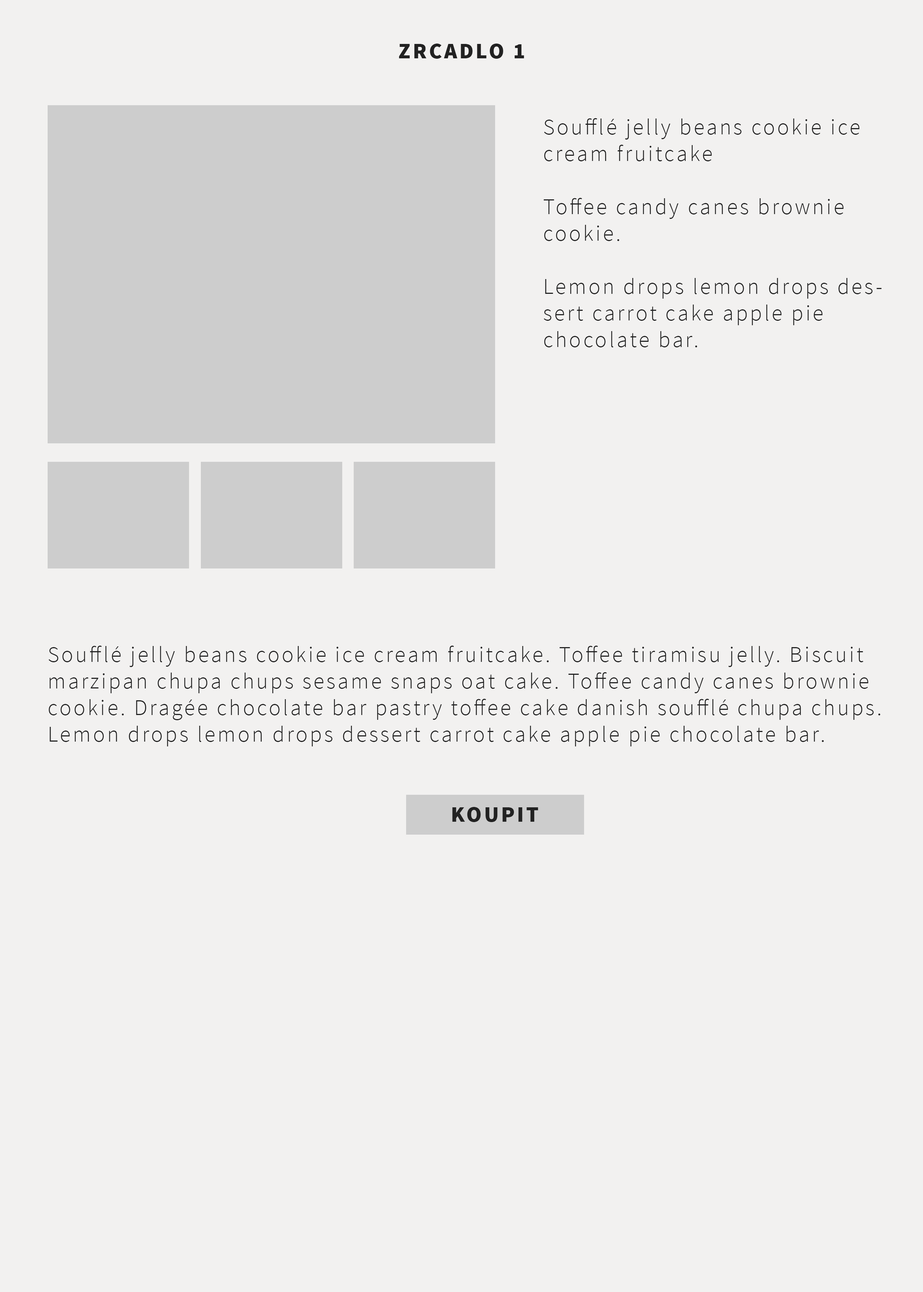
<style>
.page{position:relative;width:923px;height:1292px;background:#f2f1f0}
.page>*{position:absolute;margin:0}
.t1{font:22.1px "SourceSansPro-Black";letter-spacing:0.1em;color:#222222;text-transform:uppercase}
.t2{font:22.1px "SourceSansPro-Light";letter-spacing:0.1em;color:#222222}
</style>
<div class="page">
<p class="t1" style="left:399px;top:44px;width:125px;height:15px">zrcadlo 1</p>
<p class="t2" style="left:543px;top:118px;width:339px;height:229px">Soufflé jelly beans cookie ice cream fruitcake<br><br>Toffee candy canes brownie cookie. <br><br>Lemon drops lemon drops dessert carrot cake apple pie chocolate bar.</p>
<p class="t2" style="left:48px;top:646px;width:832px;height:100px">Soufflé jelly beans cookie ice cream fruitcake. Toffee tiramisu jelly. Biscuit marzipan chupa chups sesame snaps oat cake. Toffee candy canes brownie cookie. Dragée chocolate bar pastry toffee cake danish soufflé chupa chups. Lemon drops lemon drops dessert carrot cake apple pie chocolate bar.</p>
<p class="t1" style="left:452px;top:807px;width:86px;height:15px">koupit</p>
</div>
